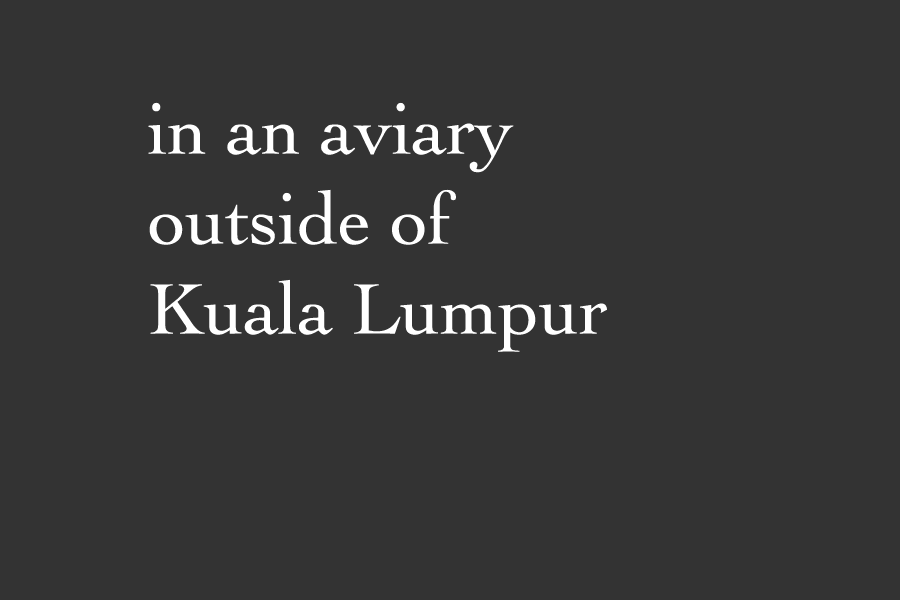
<style>
.page{position:relative;width:900px;height:600px;background:#333333}
.page>*{position:absolute;margin:0}
.t1{font:75px "Cochin";color:#ffffff}
</style>
<div class="page">
<p class="t1" style="left:148px;top:102px;width:459px;height:250px">in an aviary <br>outside of <br>Kuala Lumpur</p>
</div>
